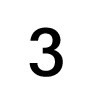
<style>
.page{position:relative;width:100px;height:100px;background:#ffffff}
.page>*{position:absolute;margin:0}
.t1{font:72px "Shruti-Bold";color:#000000}
</style>
<div class="page">
<p class="t1" style="left:29px;top:27px;width:34px;height:50px">3</p>
</div>
